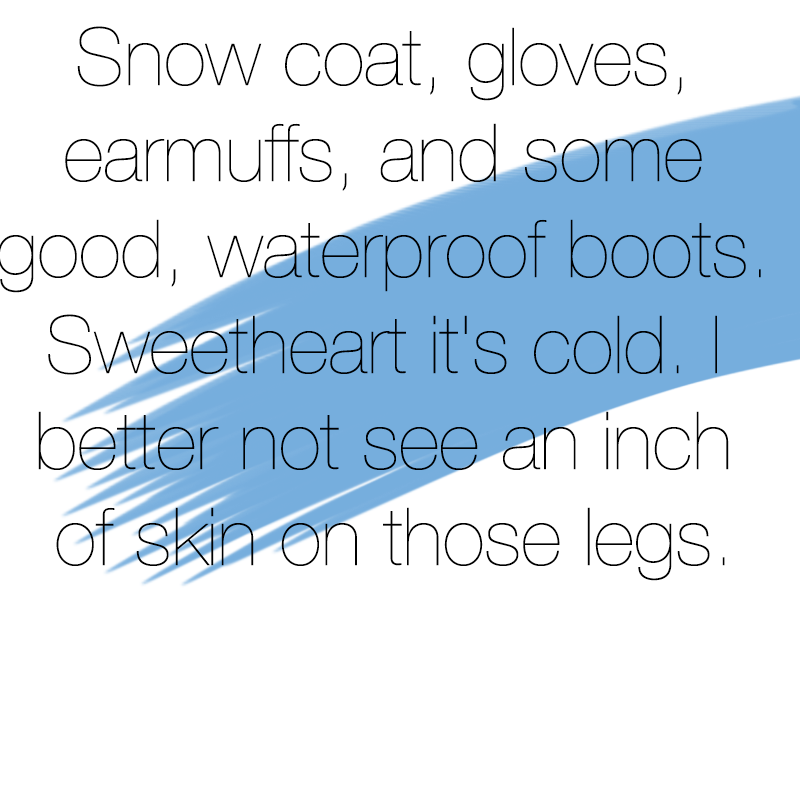
<style>
.page{position:relative;width:800px;height:800px;background:#ffffff}
.page>*{position:absolute;margin:0}
.t1{font:80px "HelveticaNeue-UltraLight";color:#000000}
</style>
<div class="page">
<p class="t1" style="left:0px;top:26px;width:761px;height:555px;text-align:center">Snow coat, gloves, <br>earmuffs, and some <br>good, waterproof boots. <br>Sweetheart it's cold. I <br>better not see an inch <br>of skin on those legs.</p>
</div>
